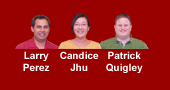
<style>
.page{position:relative;width:170px;height:90px;background:#990000}
.page>*{position:absolute;margin:0}
.t1{font:10px "Arial-BoldMT";color:#ffffff}
</style>
<div class="page">
<p class="t1" style="left:23px;top:51px;width:27px;height:20px;text-align:center">Larry<br>Perez</p>
<p class="t1" style="left:60px;top:51px;width:39px;height:20px;text-align:center">Candice<br>Jhu</p>
<p class="t1" style="left:106px;top:51px;width:37px;height:22px;text-align:center">Patrick<br>Quigley</p>
</div>
